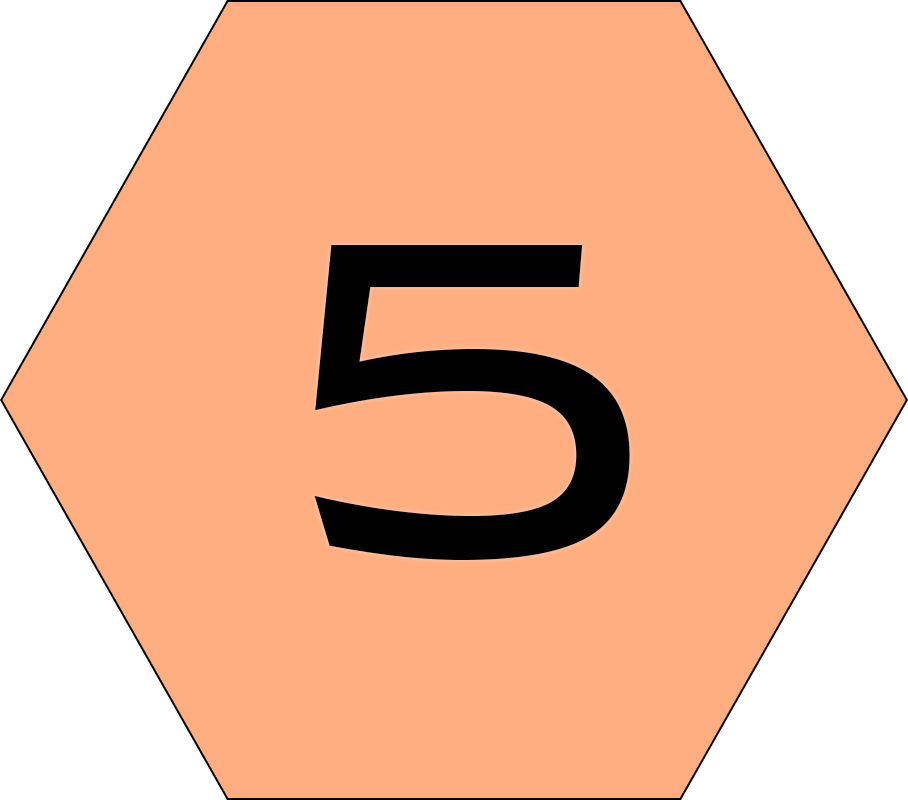
<style>
.page{position:relative;width:908px;height:800px;background:#ffae82}
.page>*{position:absolute;margin:0}
.t1{font:600px "BankGothicBT-Light";color:#000000}
</style>
<div class="page">
<p class="t1" style="left:314px;top:245px;width:316px;height:315px">5</p>
</div>
